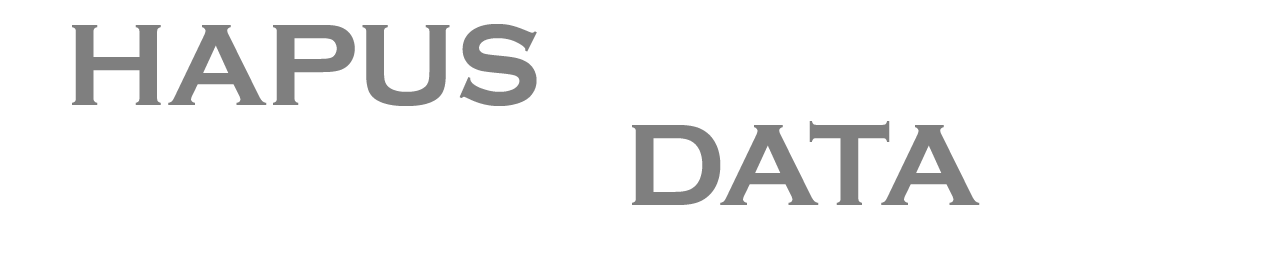
<style>
.page{position:relative;width:1266px;height:274px;background:#ffffff}
.page>*{position:absolute;margin:0}
.t1{font:120px "CopperplateGothic-Bold";color:#7f7f7f}
</style>
<div class="page">
<p class="t1" style="left:72px;top:24px;width:465px;height:82px">HAPUS</p>
<p class="t1" style="left:632px;top:121px;width:348px;height:84px">DATA</p>
</div>
